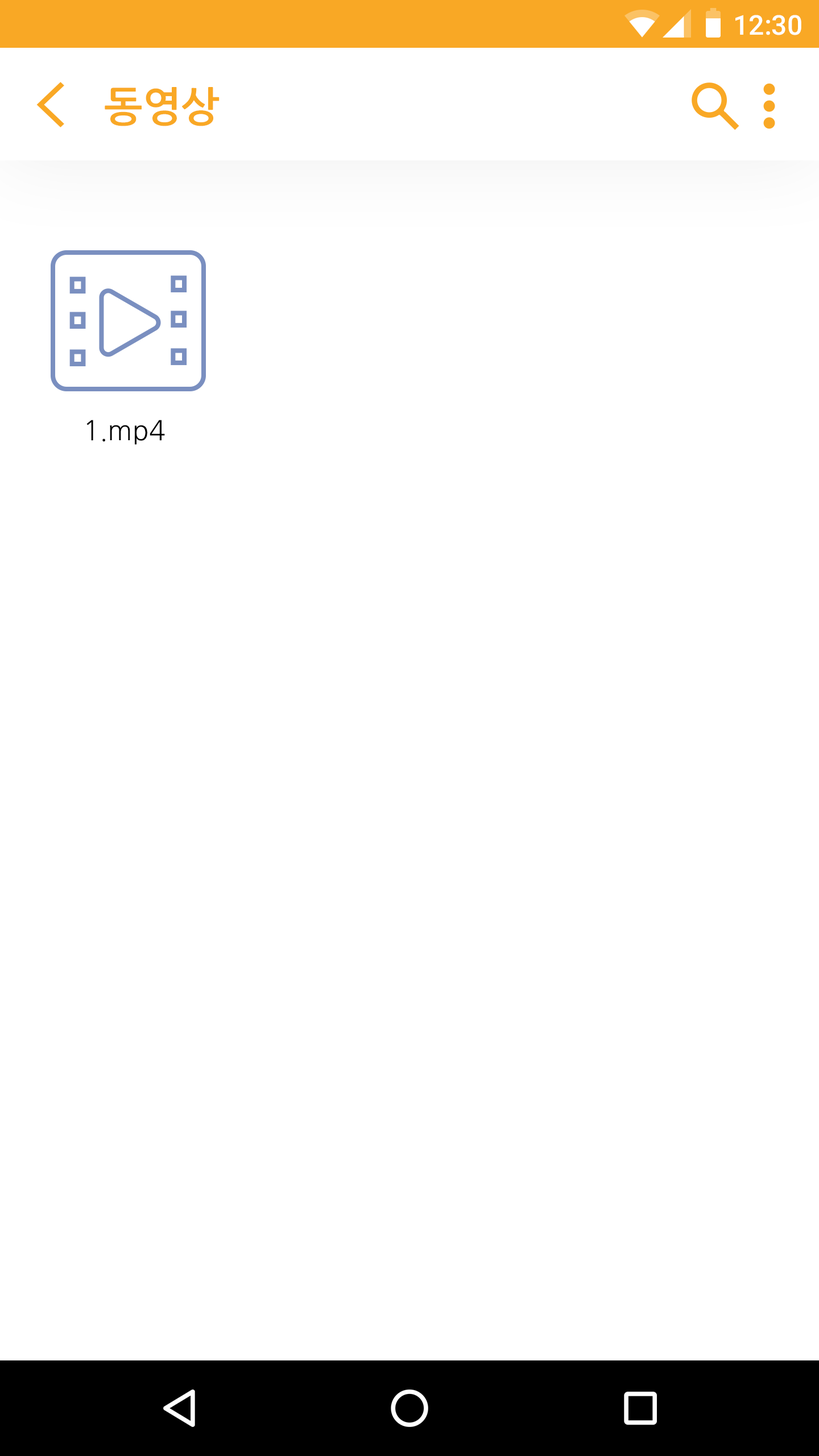
<style>
.page{position:relative;width:819px;height:1456px;background:#ffffff}
.page>*{position:absolute;margin:0}
.t1{font:27.3px "Roboto-Medium";color:#ffffff}
.t2{font:40.9px "NanumGothicBold";color:#f9a825}
.t3{font:27.3px "NanumGothic";color:#000000}
</style>
<div class="page">
<p class="t1" style="left:735px;top:15px;width:66px;height:20px">12:30</p>
<p class="t2" style="left:105px;top:87px;width:115px;height:39px">동영상</p>
<p class="t3" style="left:86px;top:420px;width:79px;height:25px">1.mp4</p>
</div>
